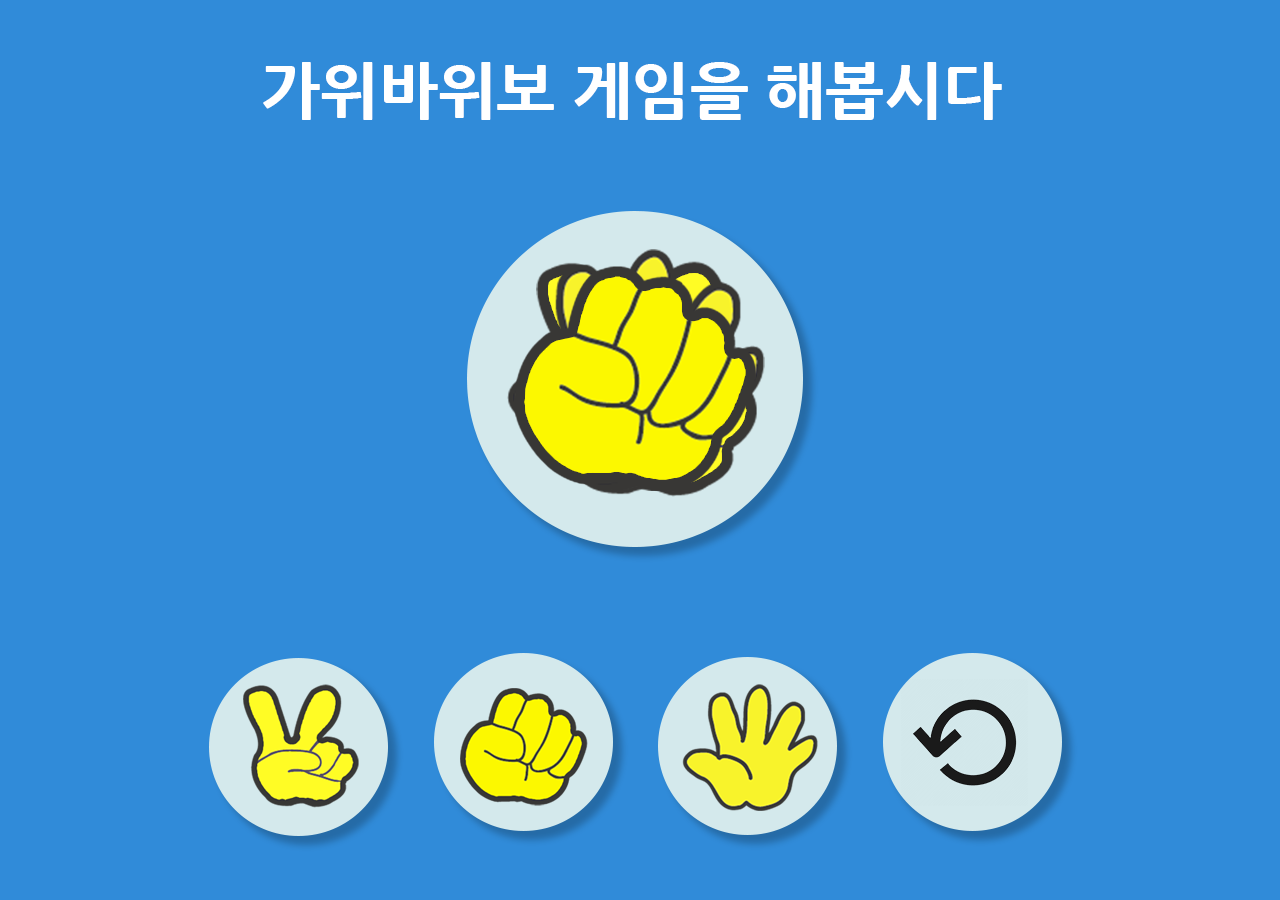
<style>
.page{position:relative;width:1280px;height:900px;background:#308bd9}
.page>*{position:absolute;margin:0}
.t1{font:62.5px "NanumGothicExtraBold";color:#ffffff}
</style>
<div class="page">
<p class="t1" style="left:263px;top:62px;width:739px;height:58px">가위바위보 게임을 해봅시다</p>
</div>
